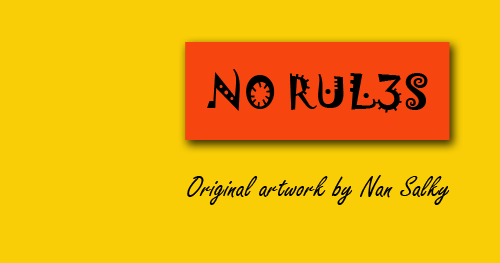
<style>
.page{position:relative;width:500px;height:263px;background:#f9ce06}
.page>*{position:absolute;margin:0}
.t1{font:42.1px "Jokerman-Regular";color:#000000;text-transform:uppercase}
.t2{font:31.6px "FreestyleScript-Regular";color:#000000}
</style>
<div class="page">
<p class="t1" style="left:207px;top:69px;width:221px;height:44px">No Rul3s</p>
<p class="t2" style="left:187px;top:175px;width:263px;height:30px">Original artwork by Nan Salky</p>
</div>
